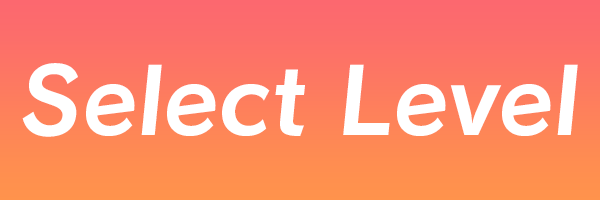
<style>
.page{position:relative;width:600px;height:200px}
.page>*{position:absolute;margin:0}
.t1{font:90px "Calamity-Bold";color:#ffffff}
</style>
<div class="page">
<p class="t1" style="left:22px;top:63px;width:556px;height:74px">Select Level</p>
</div>
